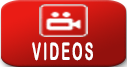
<style>
.page{position:relative;width:127px;height:67px}
.page>*{position:absolute;margin:0}
.t1{font:24px "ArialRoundedMTBold";letter-spacing:0.165em;color:#ffffff;scale:0.55 1}
</style>
<div class="page">
<p class="t1" style="left:32px;top:42px;width:61px;height:19px">VIDEOS</p>
</div>
